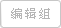
<style>
.page{position:relative;width:61px;height:28px;background:#ffffff}
.page>*{position:absolute;margin:0}
.t1{font:12px "SimSun";letter-spacing:0.16em;color:#b6b6b6}
</style>
<div class="page">
<p class="t1" style="left:11px;top:8px;width:39px;height:11px">编辑组</p>
</div>
